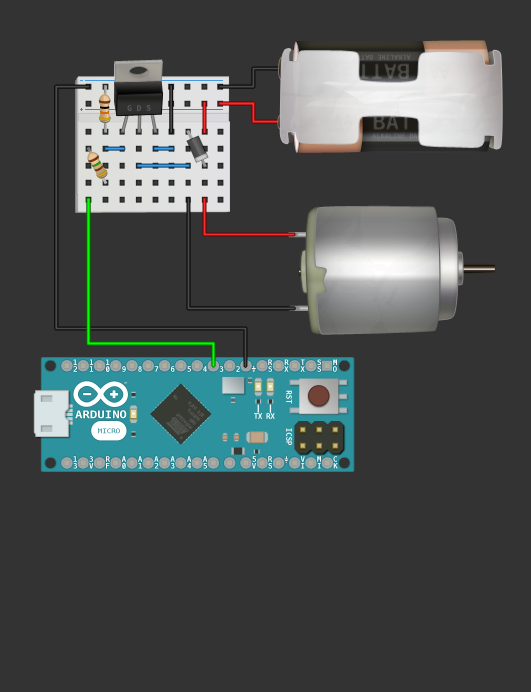
<style>
.page{position:relative;width:531px;height:692px;background:#333333}
.page>*{position:absolute;margin:0}
.t1{font:16.2px "Menlo-Bold";color:#e1e1e1}
.t2{font:8px "Menlo-Bold";color:#575757}
.t3{font:16.2px "Menlo-Bold";color:#d5d5d4}
.t4{font:7.4px "Menlo-Bold"}
.t5{font:7.4px "Menlo-Bold";color:#ffffff}
.t6{font:2.1px "Menlo-Bold"}
.t7{font:4.2px "Menlo-Regular";color:#555852}
.t8{font:4.2px "Menlo-Regular"}
.t9{font:10.4px "Menlo-Bold";color:#ffffff;scale:1.19 1}
.t10{font:6.6px "Menlo-Regular";scale:1.12 1}
</style>
<div class="page">
<p class="t1" style="left:430px;top:67px;width:20px;height:12px;rotate:180deg">AA</p>
<p class="t2" style="left:127px;top:105px;width:24px;height:6px">G D S</p>
<p class="t3" style="left:333px;top:114px;width:20px;height:12px">AA</p>
<p class="t4" style="left:73px;top:366px;width:4px;height:6px">2</p>
<p class="t5" style="left:73px;top:359px;width:4px;height:6px">1</p>
<p class="t5" style="left:89px;top:366px;width:5px;height:6px">1</p>
<p class="t5" style="left:89px;top:359px;width:5px;height:6px">1</p>
<p class="t5" style="left:106px;top:366px;width:4px;height:6px">0</p>
<p class="t5" style="left:106px;top:359px;width:4px;height:6px">1</p>
<p class="t4" style="left:122px;top:366px;width:4px;height:6px">9</p>
<p class="t4" style="left:138px;top:366px;width:4px;height:6px">8</p>
<p class="t4" style="left:154px;top:366px;width:5px;height:6px">7</p>
<p class="t5" style="left:171px;top:366px;width:4px;height:6px">6</p>
<p class="t5" style="left:187px;top:366px;width:4px;height:6px">5</p>
<p class="t4" style="left:203px;top:366px;width:4px;height:6px">4</p>
<p class="t5" style="left:219px;top:366px;width:5px;height:6px">3</p>
<p class="t4" style="left:236px;top:366px;width:4px;height:6px">2</p>
<p class="t5" style="left:268px;top:366px;width:4px;height:6px">S</p>
<p class="t5" style="left:268px;top:359px;width:5px;height:6px">R</p>
<p class="t5" style="left:284px;top:366px;width:5px;height:6px">X</p>
<p class="t5" style="left:284px;top:359px;width:5px;height:6px">R</p>
<p class="t5" style="left:300px;top:366px;width:5px;height:6px">X</p>
<p class="t4" style="left:300px;top:359px;width:5px;height:6px">T</p>
<p class="t5" style="left:317px;top:366px;width:4px;height:6px">S</p>
<p class="t5" style="left:317px;top:359px;width:4px;height:6px">S</p>
<p class="t5" style="left:333px;top:366px;width:4px;height:6px">O</p>
<p class="t5" style="left:333px;top:359px;width:4px;height:6px">M</p>
<p class="t6" style="left:124px;top:382px;width:3px;height:2px">TM</p>
<p class="t5" style="left:286px;top:390px;width:6px;height:14px;rotate:90deg">RST</p>
<p class="t7" style="left:173px;top:394px;width:28px;height:27px;rotate:-135deg">ROBOTS      TM</p>
<p class="t8" style="left:188px;top:401px;width:17px;height:16px;rotate:-135deg">BIG DATA</p>
<p class="t9" style="left:75px;top:410px;width:52px;height:9px">ARDUINO</p>
<p class="t7" style="left:175px;top:413px;width:18px;height:17px;rotate:-135deg">MEGA32U4</p>
<p class="t5" style="left:254px;top:413px;width:9px;height:6px">TX</p>
<p class="t5" style="left:266px;top:413px;width:9px;height:6px">RX</p>
<p class="t7" style="left:189px;top:418px;width:8px;height:7px;rotate:-135deg">RBD</p>
<p class="t10" style="left:98px;top:428px;width:22px;height:6px">MICRO</p>
<p class="t5" style="left:286px;top:428px;width:6px;height:17px;rotate:90deg">ICSP</p>
<p class="t4" style="left:73px;top:456px;width:4px;height:6px">1</p>
<p class="t4" style="left:89px;top:456px;width:4px;height:6px">3</p>
<p class="t5" style="left:106px;top:456px;width:4px;height:6px">R</p>
<p class="t4" style="left:121px;top:456px;width:5px;height:6px">A</p>
<p class="t4" style="left:138px;top:456px;width:5px;height:6px">A</p>
<p class="t5" style="left:154px;top:456px;width:5px;height:6px">A</p>
<p class="t5" style="left:170px;top:456px;width:5px;height:6px">A</p>
<p class="t4" style="left:187px;top:456px;width:5px;height:6px">A</p>
<p class="t4" style="left:203px;top:456px;width:5px;height:6px">A</p>
<p class="t5" style="left:252px;top:456px;width:4px;height:6px">5</p>
<p class="t5" style="left:268px;top:456px;width:5px;height:6px">R</p>
<p class="t5" style="left:300px;top:456px;width:5px;height:6px">V</p>
<p class="t5" style="left:317px;top:456px;width:4px;height:6px">M</p>
<p class="t4" style="left:333px;top:456px;width:4px;height:6px">C</p>
<p class="t4" style="left:73px;top:463px;width:4px;height:6px">3</p>
<p class="t5" style="left:89px;top:463px;width:5px;height:6px">V</p>
<p class="t5" style="left:106px;top:463px;width:4px;height:6px">F</p>
<p class="t5" style="left:122px;top:463px;width:4px;height:6px">0</p>
<p class="t4" style="left:138px;top:463px;width:4px;height:6px">1</p>
<p class="t5" style="left:154px;top:463px;width:5px;height:6px">2</p>
<p class="t4" style="left:171px;top:463px;width:4px;height:6px">3</p>
<p class="t4" style="left:187px;top:463px;width:4px;height:6px">4</p>
<p class="t5" style="left:203px;top:463px;width:4px;height:6px">5</p>
<p class="t4" style="left:252px;top:463px;width:4px;height:6px">V</p>
<p class="t5" style="left:268px;top:463px;width:4px;height:6px">S</p>
<p class="t5" style="left:301px;top:463px;width:4px;height:6px">I</p>
<p class="t5" style="left:317px;top:463px;width:4px;height:6px">I</p>
<p class="t5" style="left:333px;top:463px;width:5px;height:6px">K</p>
</div>
